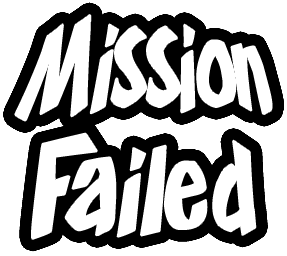
<style>
.page{position:relative;width:287px;height:256px;background:#ffffff}
.page>*{position:absolute;margin:0}
.t1{font:107.9px/97.8px "Frosty'sWinterland";letter-spacing:-0.005em;color:#ffffff;scale:1.22 1}
</style>
<div class="page">
<p class="t1" style="left:15px;top:15px;width:257px;height:224px;text-align:center">Mission<br>Failed</p>
</div>
